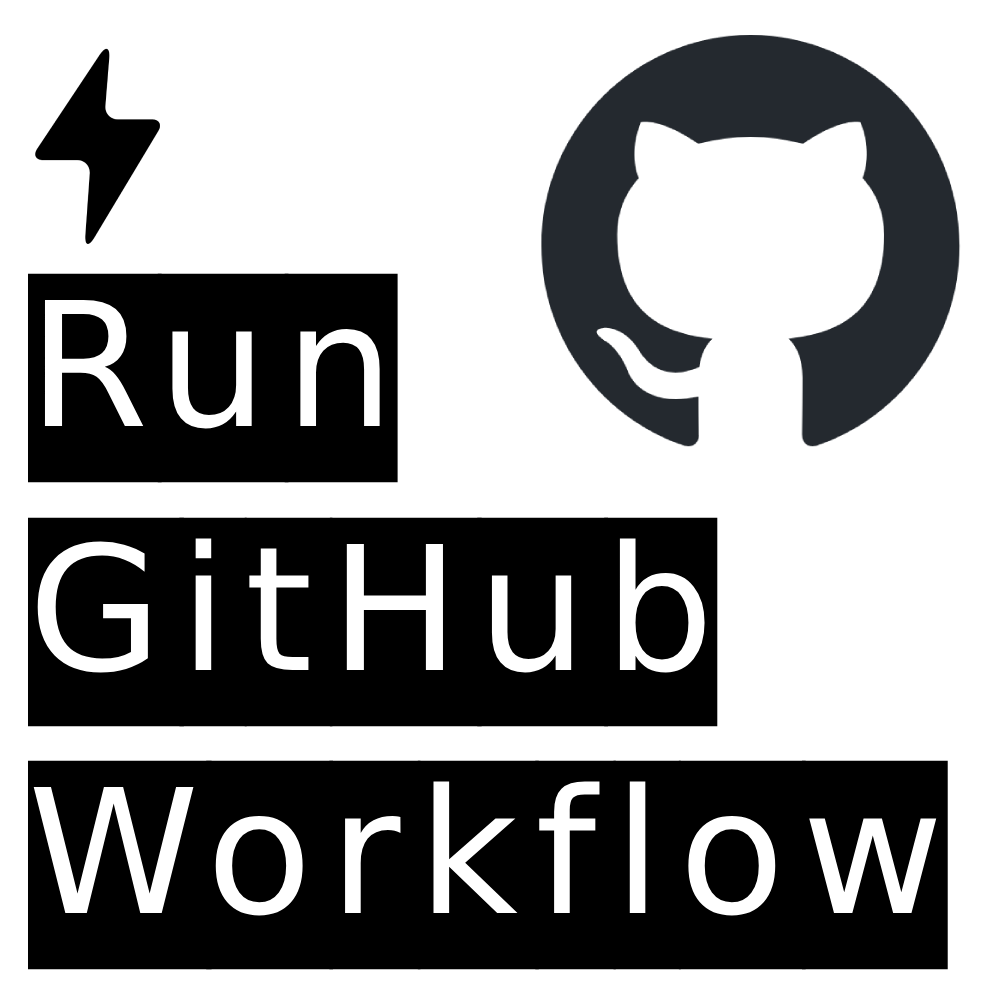
<style>
.page{position:relative;width:1000px;height:1000px;background:#ffffff}
.page>*{position:absolute;margin:0}
.t1{font:173px "BookmanOldStyle";letter-spacing:0.1em;color:#000000}
</style>
<div class="page">
<p class="t1" style="left:27px;top:273px;width:921px;height:697px">Run<br>GitHub<br>Workflow</p>
</div>
